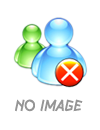
<style>
.page{position:relative;width:100px;height:130px;background:#ffffff}
.page>*{position:absolute;margin:0}
.t1{font:14px "LondonOlympics2012";color:#959595}
</style>
<div class="page">
<p class="t1" style="left:15px;top:99px;width:68px;height:13px">NO IMAGE</p>
</div>
